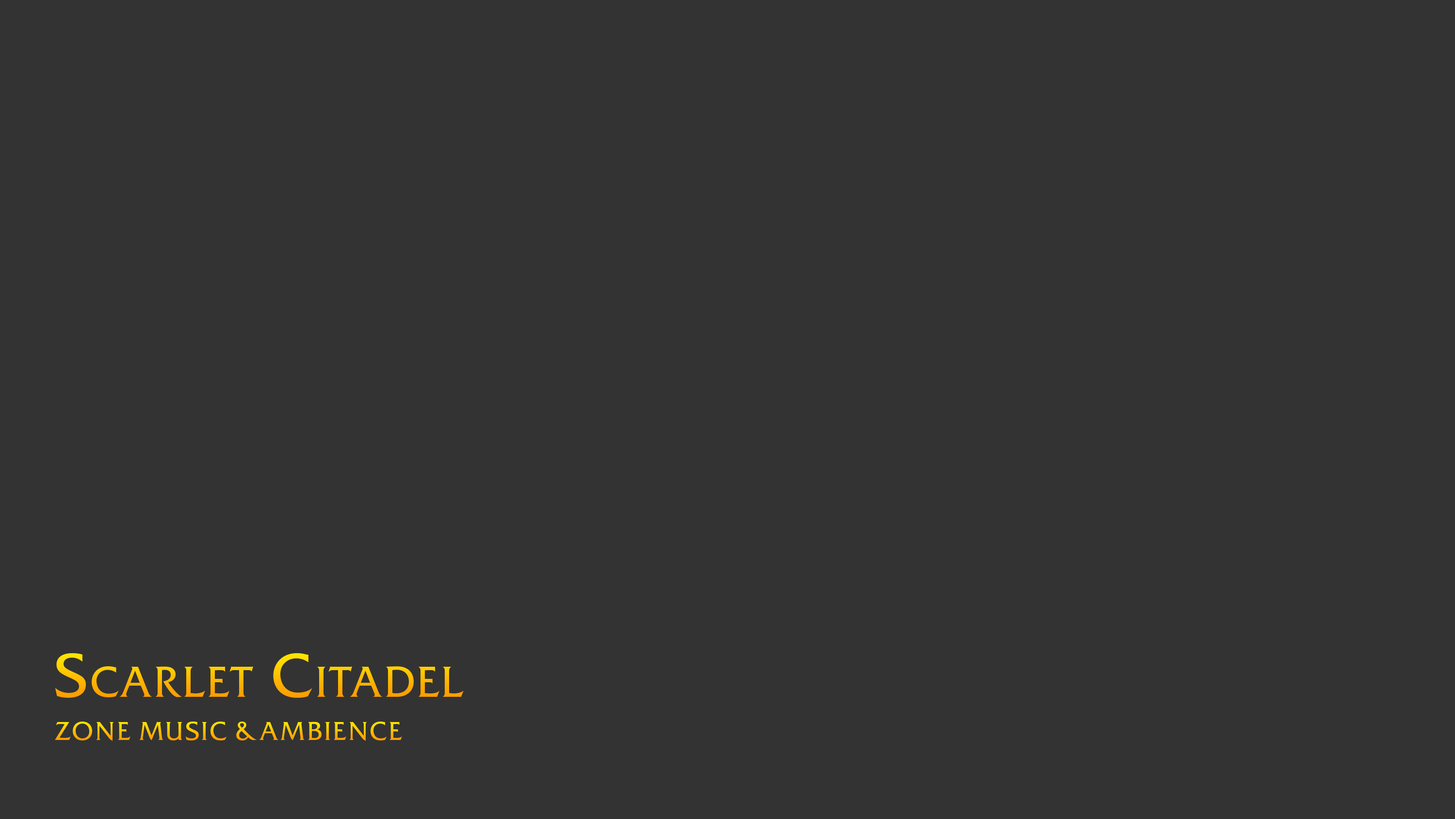
<style>
.page{position:relative;width:1455px;height:819px;background:#333333}
.page>*{position:absolute;margin:0}
.t1{font:61px "FrizQuadrataC";letter-spacing:0.05em;font-variant:small-caps}
.t2{font:25.4px "FrizQuadrataC";letter-spacing:0.075em;font-variant:small-caps}
</style>
<div class="page">
<p class="t1" style="left:55px;top:653px;width:409px;height:45px">Scarlet Citadel</p>
<p class="t2" style="left:55px;top:722px;width:347px;height:19px">ZONE MUSIC &amp; AMBIENCE</p>
</div>
